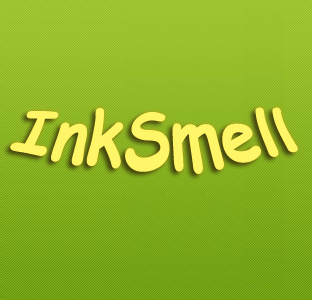
<style>
.page{position:relative;width:312px;height:300px}
.page>*{position:absolute;margin:0}
.t1{font:60px "ComicSansMS-Bold";color:#fef668}
</style>
<div class="page">
<p class="t1" style="left:10px;top:107px;width:288px;height:67px">InkSmell</p>
</div>
